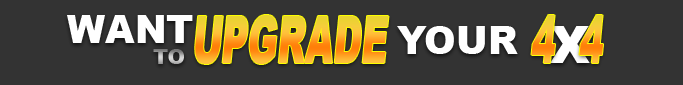
<style>
.page{position:relative;width:683px;height:85px;background:#333333}
.page>*{position:absolute;margin:0}
.t1{font:38px "Arial-Black";color:#ffffff}
.t2{font:66.2px "Arial-Black";font-style:italic;scale:0.54 1}
.t3{font:52.4px "Arial-Black";letter-spacing:0.12em;color:#ffffff;scale:0.97 1}
</style>
<div class="page">
<p class="t1" style="left:67px;top:15px;width:126px;height:28px">WANT</p>
<p class="t2" style="left:195px;top:15px;width:194px;height:49px">UPGRADE</p>
<p class="t2" style="left:531px;top:15px;width:72px;height:48px">4  4</p>
<p class="t1" style="left:397px;top:26px;width:121px;height:28px">YOUR</p>
<p class="t3" style="left:550px;top:26px;width:40px;height:37px">X</p>
</div>
